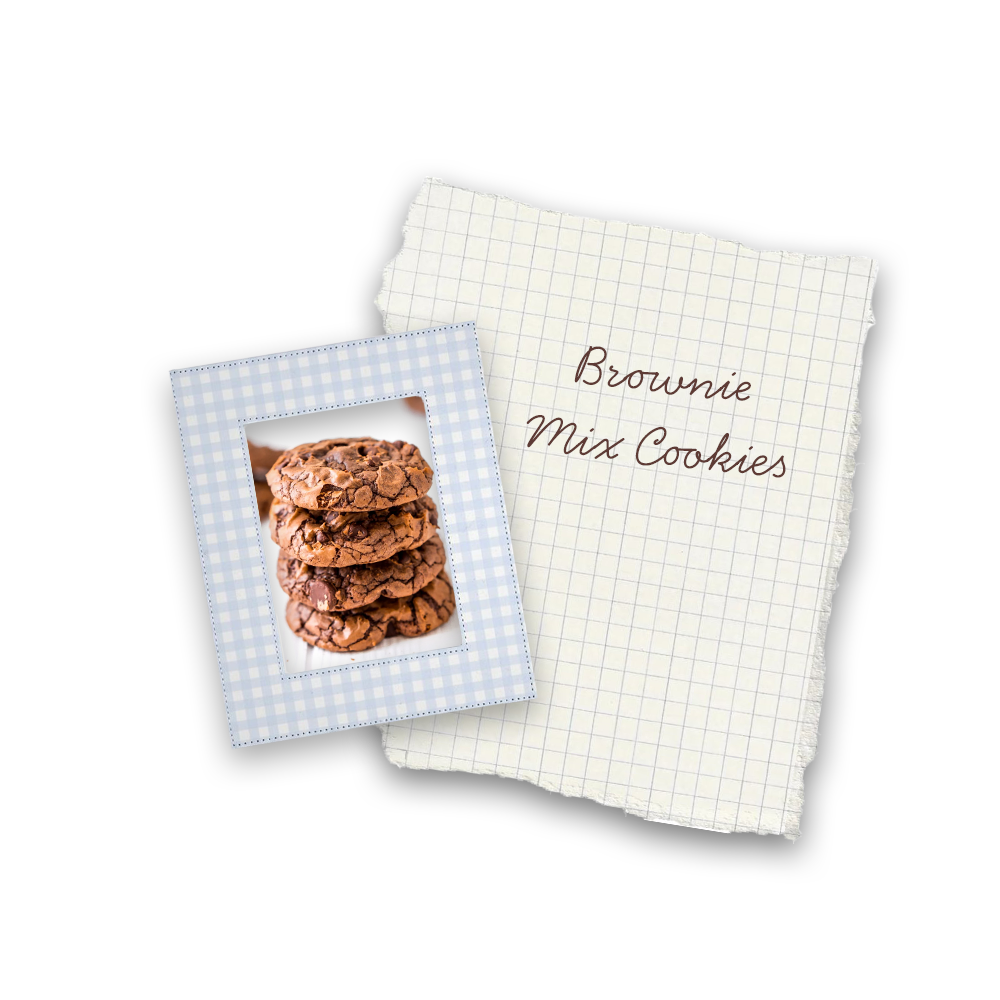
<style>
.page{position:relative;width:1000px;height:1000px;background:#ffffff}
.page>*{position:absolute;margin:0}
.t1{font:60px "HandsomePro";color:#5e3b35}
</style>
<div class="page">
<p class="t1" style="left:526px;top:346px;width:260px;height:132px;rotate:6deg">Brownie Mix Cookies</p>
</div>
